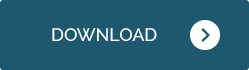
<style>
.page{position:relative;width:249px;height:70px;background:#1d586e}
.page>*{position:absolute;margin:0}
.t1{font:18px "Raleway-Medium";color:#ffffff;text-transform:uppercase}
</style>
<div class="page">
<p class="t1" style="left:52px;top:28px;width:105px;height:13px">DOWNLOAD</p>
</div>
